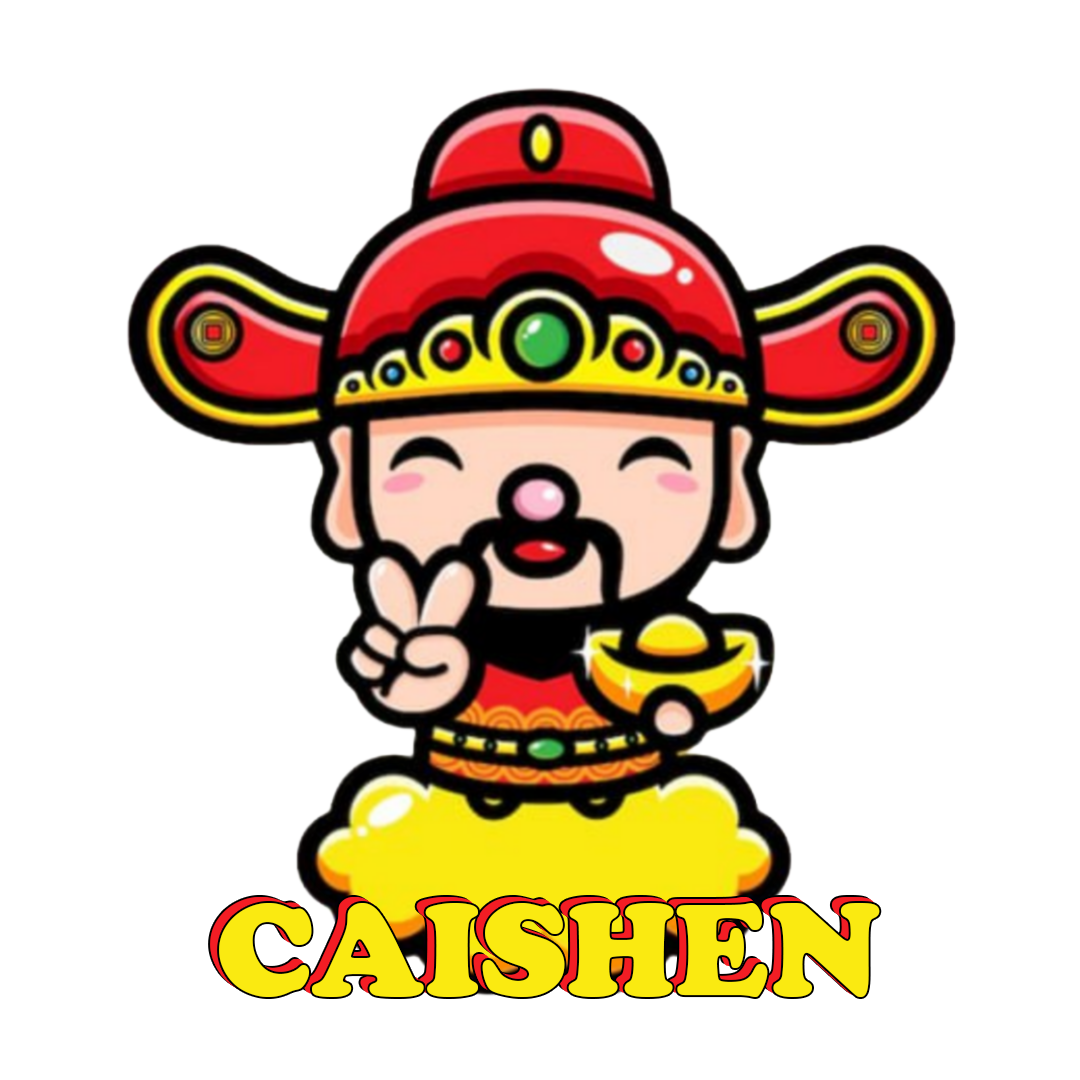
<style>
.page{position:relative;width:1080px;height:1080px;background:#ffffff}
.page>*{position:absolute;margin:0}
.t1{font:135.4px "CooperBlack";color:#faea11}
</style>
<div class="page">
<p class="t1" style="left:210px;top:897px;width:661px;height:94px">CAISHEN</p>
<p class="t1" style="left:213px;top:899px;width:661px;height:94px">CAISHEN</p>
<p class="t1" style="left:219px;top:903px;width:661px;height:94px">CAISHEN</p>
</div>
